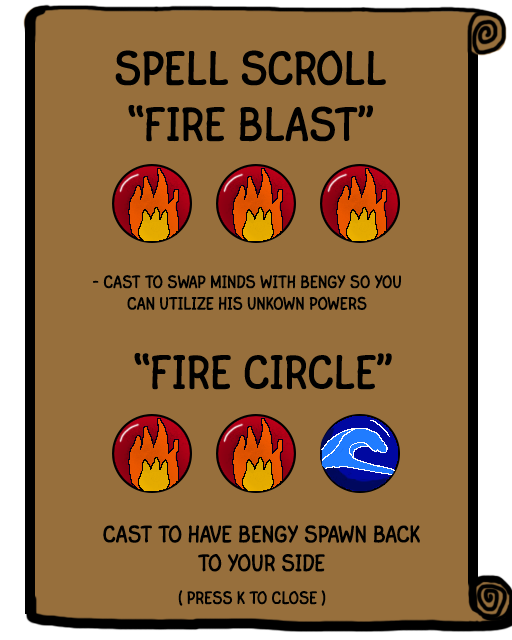
<style>
.page{position:relative;width:512px;height:640px;background:#976f3c}
.page>*{position:absolute;margin:0}
.t1{font:48px "FinaleCopyistTextExt";color:#000000;text-transform:uppercase}
.t2{font:18px "FinaleCopyistTextExt";color:#000000;text-transform:uppercase}
.t3{font:24px "FinaleCopyistTextExt";color:#000000;text-transform:uppercase}
</style>
<div class="page">
<p class="t1" style="left:128px;top:105px;width:245px;height:37px">“Fire Blast”</p>
<p class="t2" style="left:93px;top:275px;width:308px;height:35px;text-align:center">- Cast to swap minds with bengy so you can utilize his unkown powers</p>
<p class="t1" style="left:134px;top:353px;width:258px;height:37px">“Fire Circle”</p>
<p class="t3" style="left:103px;top:525px;width:317px;height:47px;text-align:center">cast to have bengy Spawn back to your side</p>
<p class="t2" style="left:178px;top:590px;width:148px;height:16px">( press k to close )</p>
</div>
